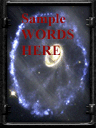
<style>
.page{position:relative;width:96px;height:128px}
.page>*{position:absolute;margin:0}
.t1{font:14px/16px "TimesNewRomanPS-BoldMT";color:#8e0908}
</style>
<div class="page">
<p class="t1" style="left:21px;top:13px;width:53px;height:42px">Sample<br>WORDS<br>HERE</p>
</div>
